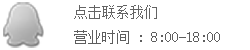
<style>
.page{position:relative;width:250px;height:50px;background:#ffffff}
.page>*{position:absolute;margin:0}
.t1{font:14px "SimSun";color:#636363}
.t2{font:14px "SimSun";color:#5d5d5d}
</style>
<div class="page">
<p class="t1" style="left:74px;top:5px;width:83px;height:14px">点击联系我们</p>
<p class="t2" style="left:74px;top:30px;width:146px;height:14px">营业时间 : 8:00-18:00</p>
</div>
